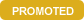
<style>
.page{position:relative;width:84px;height:20px;background:#dcad1c}
.page>*{position:absolute;margin:0}
.t1{font:11px "Arial-BoldMT";letter-spacing:-0.02em;color:#ffffff}
</style>
<div class="page">
<p class="t1" style="left:12px;top:7px;width:62px;height:8px">PROMOTED</p>
</div>
